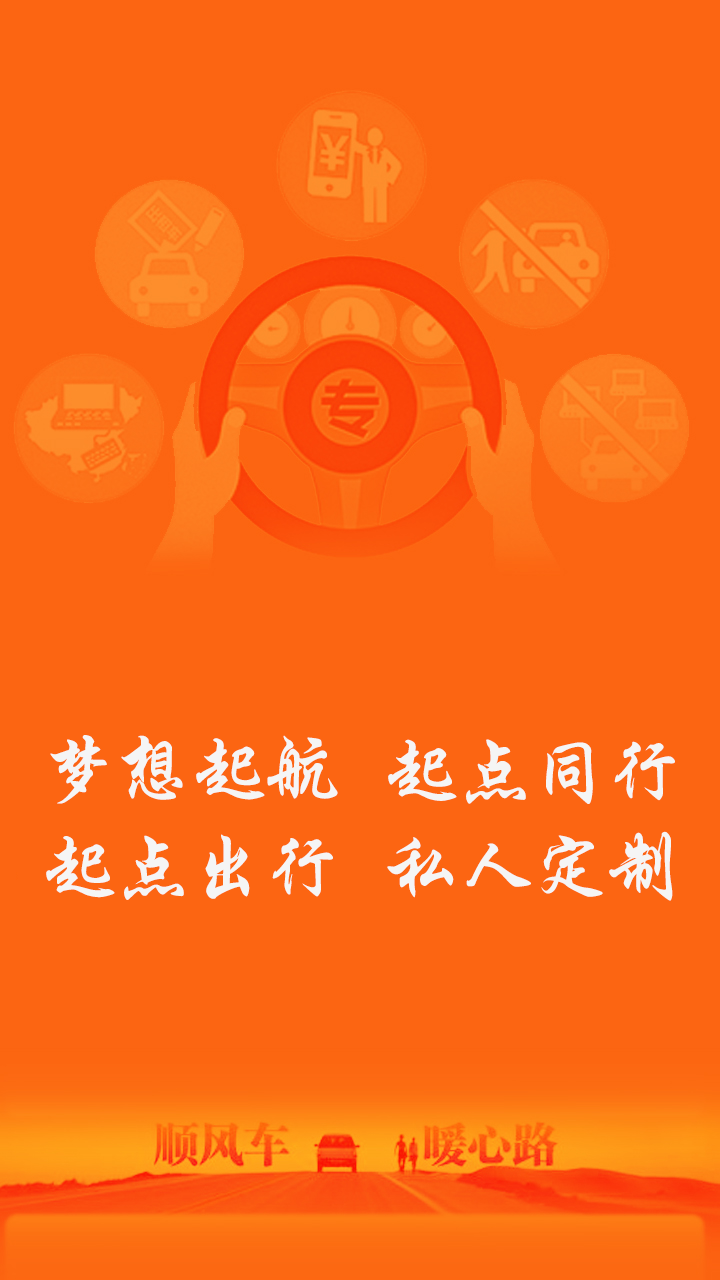
<style>
.page{position:relative;width:720px;height:1280px;background:#fc6512}
.page>*{position:absolute;margin:0}
.t1{font:75px "STXingkaiTC-Bold";color:#f5f5f5}
</style>
<div class="page">
<p class="t1" style="left:50px;top:735px;width:288px;height:69px">梦想起航</p>
<p class="t1" style="left:388px;top:739px;width:287px;height:65px">起点同行</p>
<p class="t1" style="left:387px;top:831px;width:286px;height:70px">私人定制</p>
<p class="t1" style="left:46px;top:834px;width:287px;height:66px">起点出行</p>
</div>
